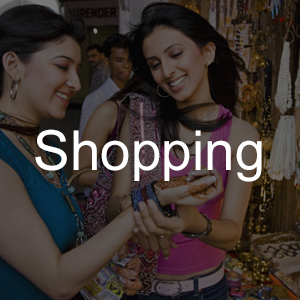
<style>
.page{position:relative;width:300px;height:300px}
.page>*{position:absolute;margin:0}
.t1{font:55px "ArialMT";color:#ffffff}
</style>
<div class="page">
<p class="t1" style="left:35px;top:129px;width:227px;height:53px">Shopping</p>
</div>
